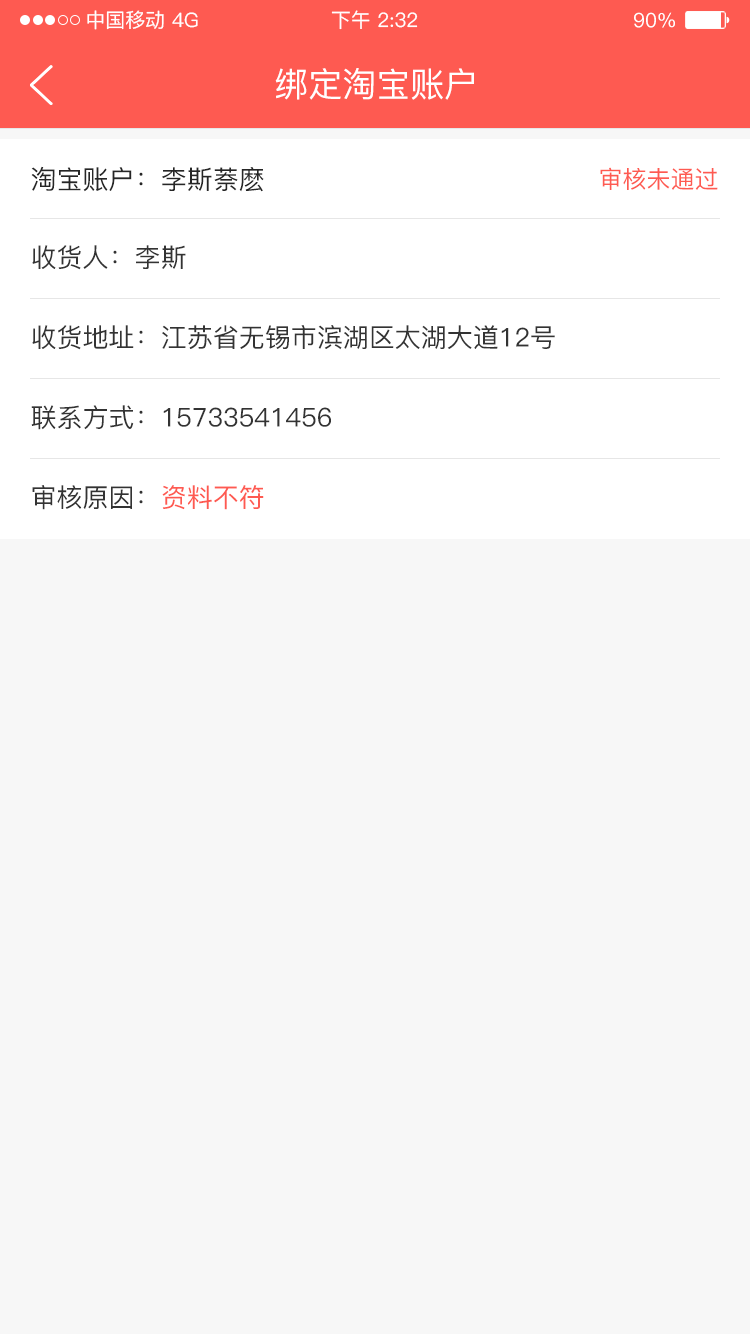
<style>
.page{position:relative;width:750px;height:1334px;background:#f7f7f7}
.page>*{position:absolute;margin:0}
.t1{font:20px "PingFang-SC-Medium";color:#ffffff}
.t2{font:34px "PingFang-SC-Medium";color:#ffffff}
.t3{font:26px "PingFang-SC-Medium";color:#262626}
.t4{font:24px "PingFang-SC-Medium";color:#fe5a51}
.t5{font:26px "PingFang-SC-Medium";color:#333333}
.t6{font:26px "PingFang-SC-Medium";color:#fe5a51}
</style>
<div class="page">
<p class="t1" style="left:87px;top:10px;width:77px;height:20px">中国移动</p>
<p class="t1" style="left:172px;top:12px;width:26px;height:16px">4G</p>
<p class="t1" style="left:331px;top:10px;width:87px;height:20px">下午 2:32</p>
<p class="t1" style="left:634px;top:12px;width:41px;height:16px">90%</p>
<p class="t2" style="left:275px;top:68px;width:199px;height:32px">绑定淘宝账户</p>
<p class="t3" style="left:31px;top:166px;width:233px;height:26px">淘宝账户：李斯萘麽</p>
<p class="t4" style="left:600px;top:167px;width:118px;height:23px">审核未通过</p>
<p class="t5" style="left:32px;top:245px;width:154px;height:25px">收货人：李斯</p>
<p class="t5" style="left:32px;top:325px;width:523px;height:25px">收货地址：江苏省无锡市滨湖区太湖大道12号</p>
<p class="t5" style="left:31px;top:405px;width:300px;height:25px">联系方式：15733541456</p>
<p class="t5" style="left:32px;top:485px;width:232px;height:25px">审核原因：<span class="t6">资料不符</span></p>
</div>
